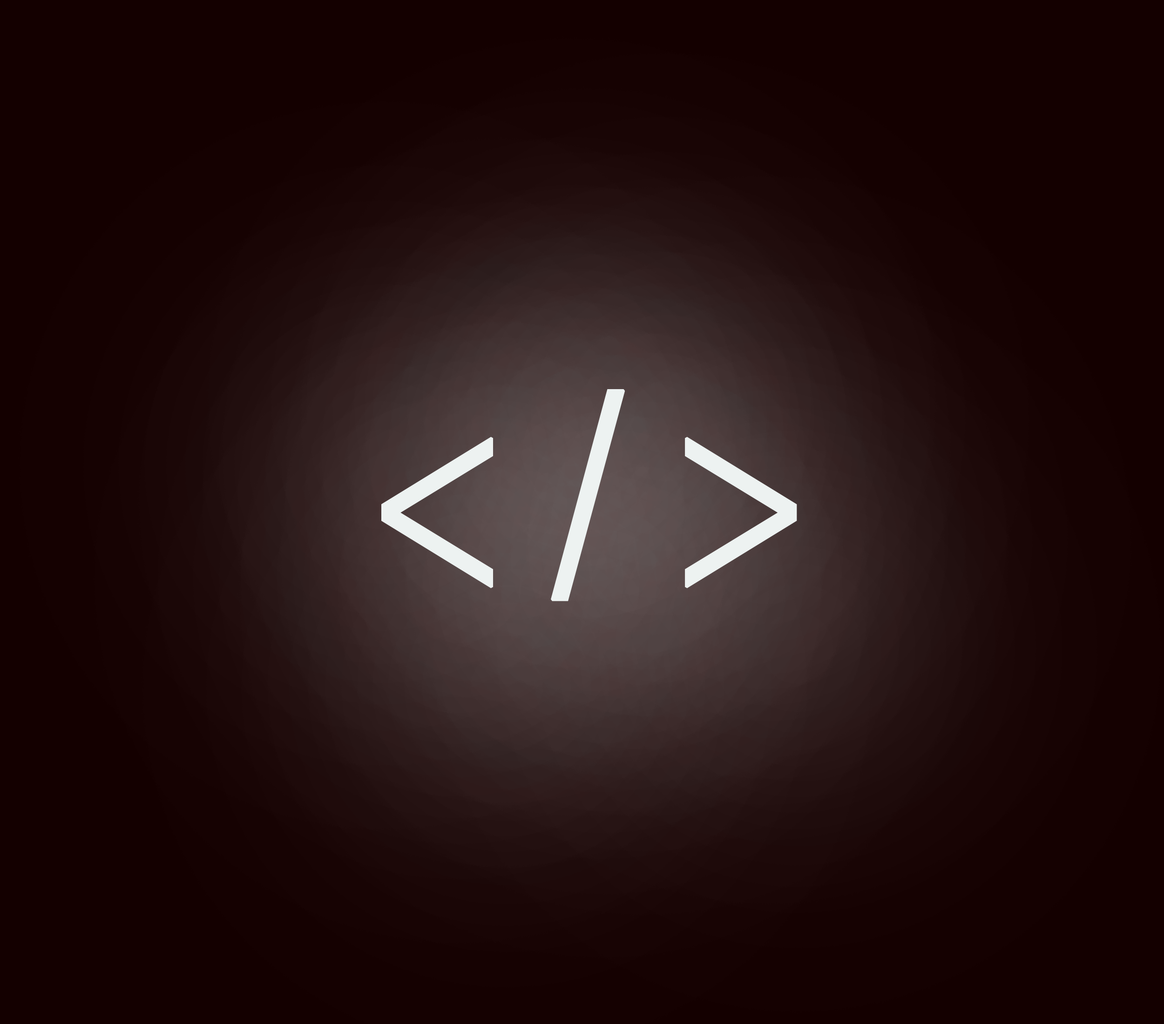
<style>
.page{position:relative;width:1164px;height:1024px;background:#140000}
.page>*{position:absolute;margin:0}
.t1{font:413.2px "AdobeArabic-Regular";letter-spacing:0.1em;color:#edf2f1;text-transform:uppercase;font-weight:bold;scale:0.85 1}
</style>
<div class="page">
<p class="t1" style="left:381px;top:389px;width:416px;height:213px">&lt;/&gt;</p>
</div>
